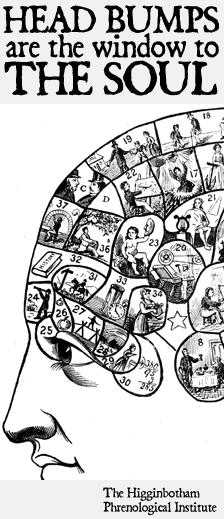
<style>
.page{position:relative;width:224px;height:519px;background:#ffffff}
.page>*{position:absolute;margin:0}
.t1{font:33px "Dominican";color:#000000}
.t2{font:29.6px "Dominican";color:#000000}
.t3{font:41.2px "Dominican";color:#000000}
.t4{font:12px "Dominican";color:#000000}
</style>
<div class="page">
<p class="t1" style="left:3px;top:5px;width:216px;height:28px">HEAD BUMPS</p>
<p class="t2" style="left:6px;top:33px;width:213px;height:25px">are the window to</p>
<p class="t3" style="left:4px;top:60px;width:214px;height:36px">THE SOUL</p>
<p class="t4" style="left:103px;top:487px;width:114px;height:29px">The Higginbotham<br>Phrenological Institute</p>
</div>
